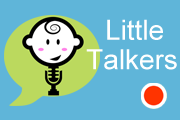
<style>
.page{position:relative;width:180px;height:120px;background:#5fb5d9}
.page>*{position:absolute;margin:0}
.t1{font:28px "ArialMT";color:#ffffff}
</style>
<div class="page">
<p class="t1" style="left:107px;top:19px;width:56px;height:21px">Little</p>
<p class="t1" style="left:86px;top:49px;width:91px;height:21px">Talkers</p>
</div>
